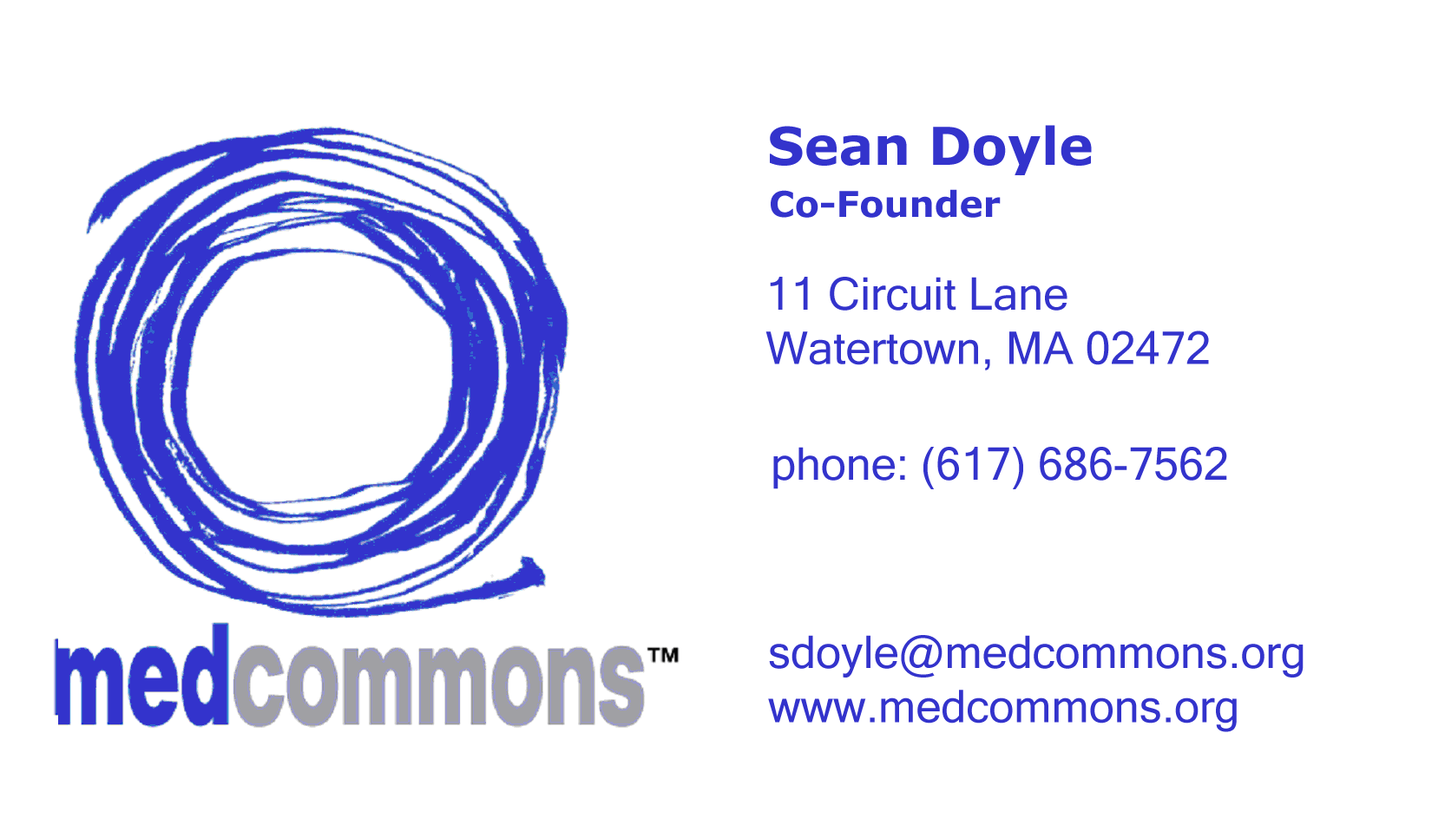
<style>
.page{position:relative;width:1445px;height:825px;background:#ffffff}
.page>*{position:absolute;margin:0}
.t1{font:52.1px "Verdana-Bold";color:#3333cc}
.t2{font:35.6px "Verdana-Bold";color:#3333cc}
.t3{font:45.1px "MicrosoftSansSerif";color:#3333cc}
</style>
<div class="page">
<p class="t1" style="left:770px;top:125px;width:322px;height:50px">Sean Doyle</p>
<p class="t2" style="left:771px;top:189px;width:230px;height:29px">Co-Founder</p>
<p class="t3" style="left:765px;top:277px;width:444px;height:94px">11 Circuit Lane<br>Watertown, MA 02472</p>
<p class="t3" style="left:773px;top:447px;width:454px;height:42px">phone: (617) 686-7562</p>
<p class="t3" style="left:768px;top:635px;width:535px;height:97px">sdoyle@medcommons.org<br>www.medcommons.org</p>
</div>
